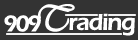
<style>
.page{position:relative;width:138px;height:40px;background:#333333}
.page>*{position:absolute;margin:0}
.t1{font:37.6px "Vivaldii";letter-spacing:-0.025em;color:#ffffff;font-weight:bold}
.t2{font:23.5px "ErasITC-Demi";letter-spacing:-0.1em;color:#ffffff}
.t3{font:23.5px "ErasITC-Demi";letter-spacing:-0.05em;color:#ffffff}
</style>
<div class="page">
<p class="t1" style="left:38px;top:4px;width:37px;height:28px">T</p>
<p class="t2" style="left:4px;top:15px;width:37px;height:17px">909</p>
<p class="t3" style="left:69px;top:13px;width:66px;height:23px">rading</p>
</div>
